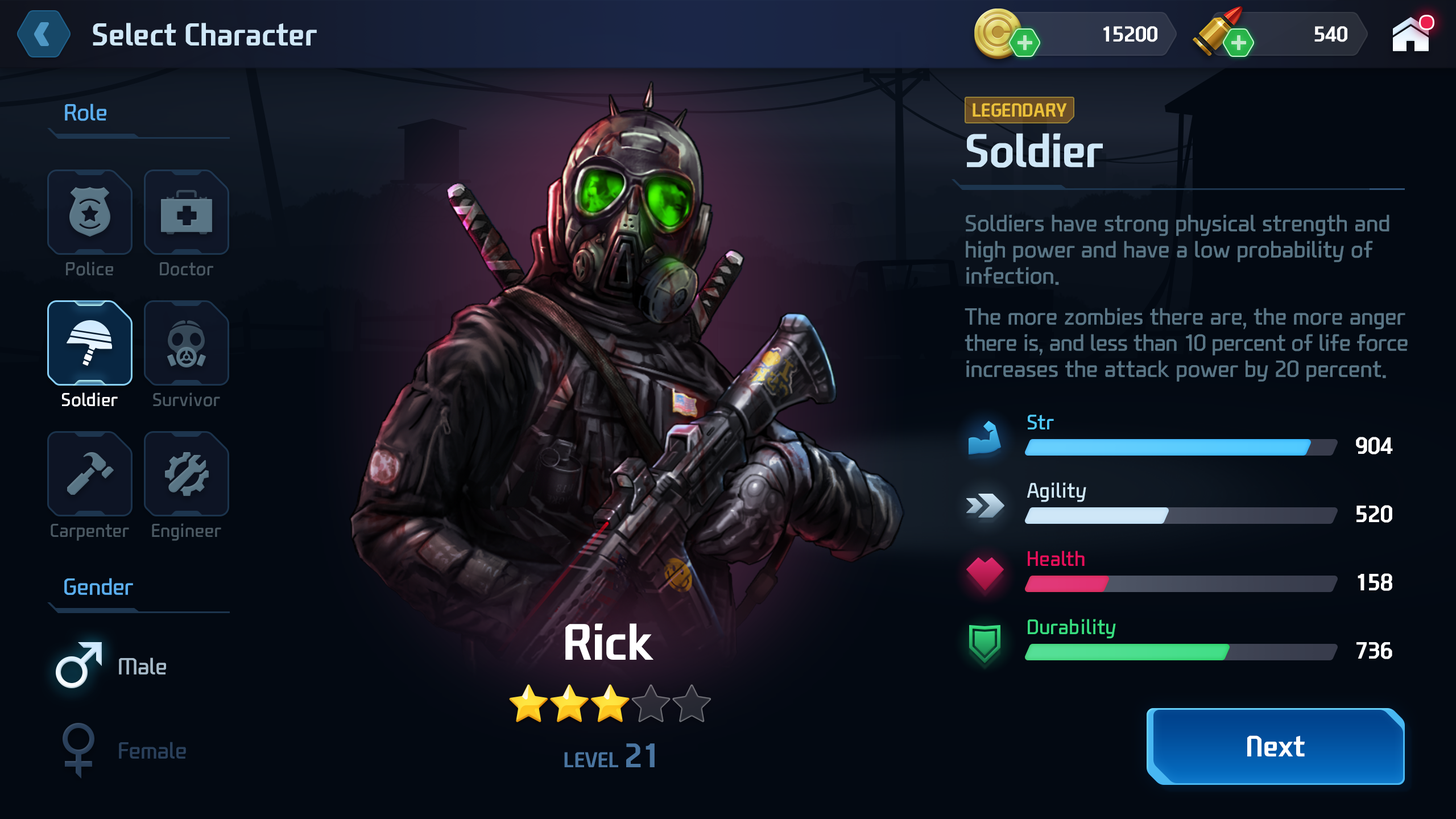
<style>
.page{position:relative;width:1456px;height:819px;background:#030912}
.page>*{position:absolute;margin:0}
.t1{font:30.6px "NEXONFootballGothicB";color:#cfe7f7}
.t2{font:20.7px "NEXONFootballGothicB";color:#ffffff;text-transform:uppercase}
.t3{font:22.7px "NEXONFootballGothicL";color:#5baeee}
.t4{font:18.2px "NEXONFootballGothicB";color:#eac03a;text-transform:uppercase}
.t5{font:45.5px "NEXONFootballGothicB";color:#cfe7f7}
.t6{font:22.7px/26.2px "NEXONFootballGothicL";color:#597585}
.t7{font:22.7px/26.2px "NEXONFootballGothicL";letter-spacing:-0.015em;color:#597585}
.t8{font:18.2px "NEXONFootballGothicL";color:#4b5963}
.t9{font:18.2px "NEXONFootballGothicL";color:#ffffff}
.t10{font:20.5px "NEXONFootballGothicL";color:#4fc9fe}
.t11{font:22.7px "NEXONFootballGothicB";color:#ffffff;text-transform:uppercase}
.t12{font:20.5px "NEXONFootballGothicL";color:#cfe7f7}
.t13{font:20.5px "NEXONFootballGothicL";color:#e50f5a}
.t14{font:49.1px "NEXONFootballGothicB";color:#ffffff}
.t15{font:20.5px "NEXONFootballGothicL";color:#38dd7f}
.t16{font:22.7px "NEXONFootballGothicL";color:#a7bbca}
.t17{font:28.4px "NEXONFootballGothicB";color:#ffffff}
.t18{font:22.7px "NEXONFootballGothicL";color:#2a405b}
.t19{font:20.6px "NEXONFootballGothicB";color:#4a75a0;text-transform:uppercase}
.t20{font:32.7px "NEXONFootballGothicB";color:#4a75a0}
</style>
<div class="page">
<p class="t1" style="left:93px;top:23px;width:224px;height:22px">Select Character</p>
<p class="t2" style="left:1103px;top:26px;width:54px;height:16px">15200</p>
<p class="t2" style="left:1314px;top:26px;width:33px;height:16px">540</p>
<p class="t3" style="left:65px;top:104px;width:41px;height:17px">Role</p>
<p class="t4" style="left:973px;top:103px;width:94px;height:14px">Legendary</p>
<p class="t5" style="left:967px;top:133px;width:136px;height:35px">Soldier</p>
<p class="t6" style="left:965px;top:214px;width:443px;height:168px">Soldiers have strong physical strength and <br>high power and have a low probability of <br>infection.<br> <br>The more zombies there are, the more anger<br><span class="t7">there is, and less than 10 percent of life force<br></span>increases the attack power by 20 percent.</p>
<p class="t8" style="left:66px;top:262px;width:47px;height:14px">Police</p>
<p class="t8" style="left:160px;top:262px;width:53px;height:14px">Doctor</p>
<p class="t9" style="left:62px;top:392px;width:56px;height:15px">Soldier</p>
<p class="t9" style="left:62px;top:392px;width:56px;height:15px">Soldier</p>
<p class="t8" style="left:153px;top:392px;width:67px;height:15px">Survivor</p>
<p class="t10" style="left:1028px;top:415px;width:26px;height:14px">Str</p>
<p class="t11" style="left:1356px;top:437px;width:37px;height:17px">904</p>
<p class="t12" style="left:1027px;top:482px;width:59px;height:20px">Agility</p>
<p class="t11" style="left:1356px;top:505px;width:36px;height:18px">520</p>
<p class="t8" style="left:51px;top:524px;width:78px;height:17px">Carpenter</p>
<p class="t8" style="left:152px;top:523px;width:69px;height:18px">Engineer</p>
<p class="t13" style="left:1028px;top:551px;width:57px;height:15px">Health</p>
<p class="t3" style="left:64px;top:578px;width:69px;height:17px">Gender</p>
<p class="t11" style="left:1358px;top:573px;width:34px;height:18px">158</p>
<p class="t14" style="left:565px;top:623px;width:88px;height:37px">Rick</p>
<p class="t15" style="left:1028px;top:619px;width:88px;height:20px">Durability</p>
<p class="t11" style="left:1356px;top:642px;width:36px;height:17px">736</p>
<p class="t16" style="left:119px;top:657px;width:47px;height:18px">Male</p>
<p class="t17" style="left:1247px;top:735px;width:58px;height:21px">Next</p>
<p class="t18" style="left:119px;top:742px;width:67px;height:17px">Female</p>
<p class="t19" style="left:564px;top:743px;width:91px;height:24px">Level <span class="t20">21</span></p>
</div>
